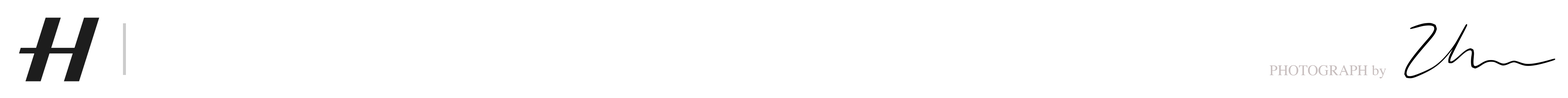
<style>
.page{position:relative;width:1568px;height:98px;background:#ffffff}
.page>*{position:absolute;margin:0}
.t1{font:14.7px "Times-Roman";color:#c8bfbf}
</style>
<div class="page">
<p class="t1" style="left:1269px;top:65px;width:117px;height:13px">PHOTOGRAPH by</p>
</div>
